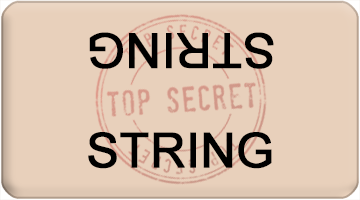
<style>
.page{position:relative;width:360px;height:200px;background:#e8d0bb}
.page>*{position:absolute;margin:0}
.t1{font:48px "ArialMT";color:#000000;font-weight:bold}
</style>
<div class="page">
<p class="t1" style="left:89px;top:32px;width:185px;height:37px;rotate:180deg">STRING</p>
<p class="t1" style="left:88px;top:132px;width:184px;height:37px">STRING</p>
</div>
